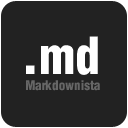
<style>
.page{position:relative;width:128px;height:128px;background:#222222}
.page>*{position:absolute;margin:0}
.t1{font:50px "Helvetica-CondensedBlack";color:#ffffff}
.t2{font:13px "Helvetica-CondensedBlack";letter-spacing:-0.025em;color:#666666}
</style>
<div class="page">
<p class="t1" style="left:26px;top:36px;width:72px;height:39px">.md</p>
<p class="t2" style="left:26px;top:80px;width:74px;height:11px">Markdownista</p>
</div>
